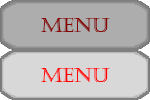
<style>
.page{position:relative;width:150px;height:100px;background:#d8d8d8}
.page>*{position:absolute;margin:0}
.t1{font:20px "Castellar";color:#850000}
.t2{font:20px "Castellar";color:#ff0101}
</style>
<div class="page">
<p class="t1" style="left:41px;top:18px;width:69px;height:14px">MENU</p>
<p class="t2" style="left:41px;top:68px;width:69px;height:14px">MENU</p>
</div>
